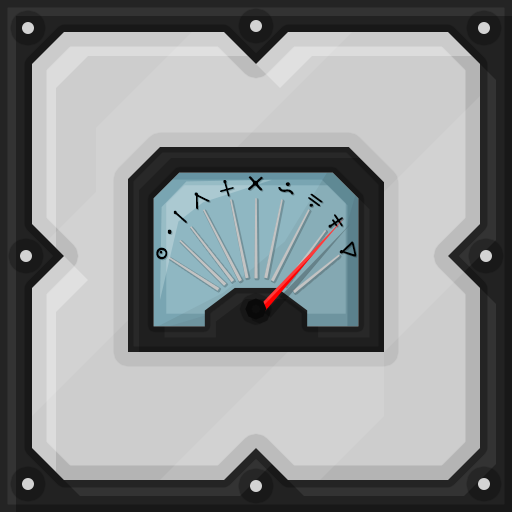
<style>
.page{position:relative;width:512px;height:512px}
.page>*{position:absolute;margin:0}
.t1{font:20.8px/25px "Futurama-Alien-Alphabet-One-Regular";color:#000000;font-weight:bold}
</style>
<div class="page">
<p class="t1" style="left:156px;top:176px;width:201px;height:84px;text-align:center">0 1 2 3 4 5 6 7 8 9</p>
</div>
